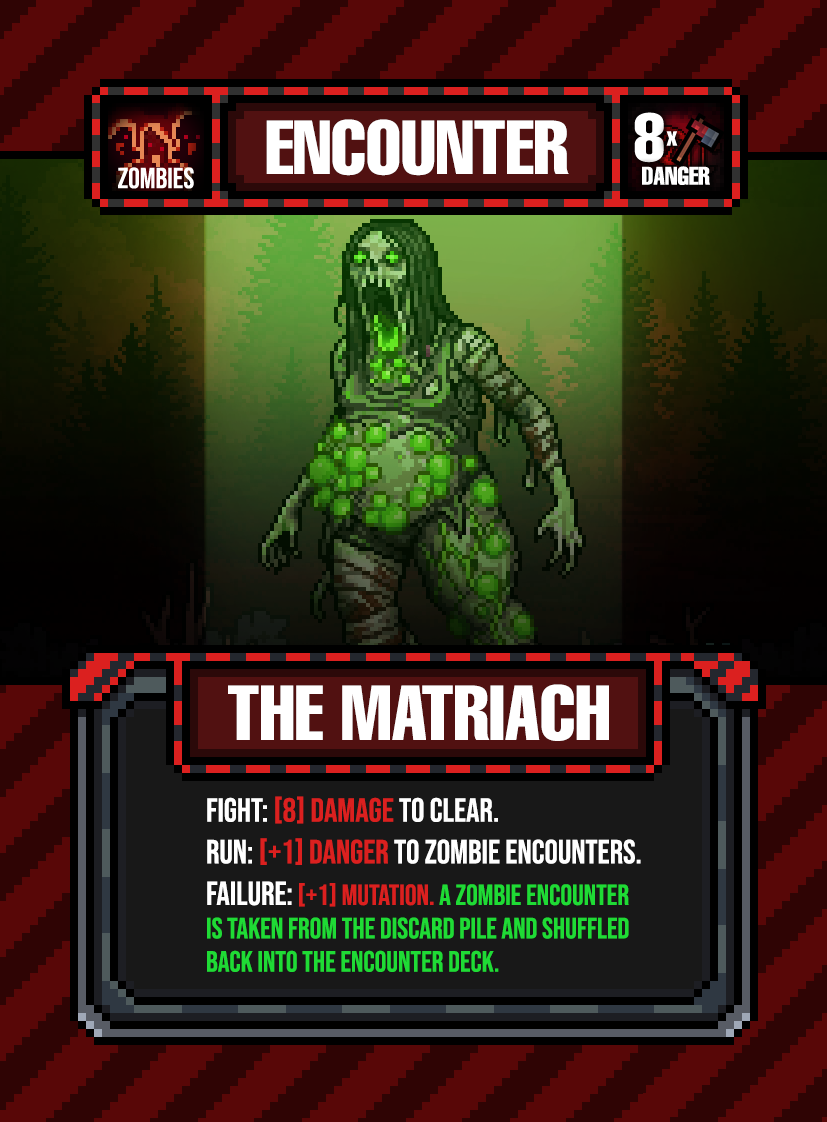
<style>
.page{position:relative;width:827px;height:1122px}
.page>*{position:absolute;margin:0}
.t1{font:75px "HelveticaLTPro-Compressed";color:#ffffff}
.t2{font:76.2px "HelveticaLTPro-Compressed";color:#ffffff}
.t3{font:29.2px/33.3px "BebasNeue-Regular";color:#1fdb35}
.t4{font:33.3px/41.7px "BebasNeue-Regular";color:#ffffff}
.t5{font:33.3px/41.7px "BebasNeue-Regular";color:#db201f}
.t6{font:33.3px/33.3px "BebasNeue-Regular";color:#db201f}
.t7{font:33.3px/33.3px "BebasNeue-Regular";color:#ffffff}
.t8{font:29.2px/41.7px "BebasNeue-Regular";color:#db201f}
</style>
<div class="page">
<p class="t1" style="left:266px;top:119px;width:303px;height:57px">ENCOUNTER</p>
<p class="t2" style="left:228px;top:684px;width:381px;height:57px">THE MATRIACH</p>
<p class="t3" style="left:207px;top:796px;width:434px;height:176px"><span class="t4">FIGHT: </span><span class="t5">[8] Damage</span><span class="t4"> to clear.<br>RUN: </span><span class="t6">[+1] Danger </span><span class="t7">to zombie encounters.<br></span><span class="t4">failure: </span><span class="t8">[+1] MUTATION. </span>a Zombie Encounter is taken from the discard pile and shuffled back into the Encounter deck.</p>
</div>
